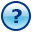
<style>
.page{position:relative;width:32px;height:32px;background:#ffffff}
.page>*{position:absolute;margin:0}
.t1{font:19px "Verdana-Bold";color:#00347d}
</style>
<div class="page">
<p class="t1" style="left:12px;top:9px;width:10px;height:14px">?</p>
</div>
